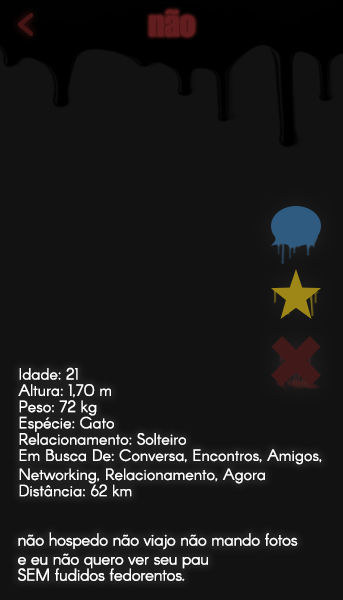
<style>
.page{position:relative;width:343px;height:600px;background:#121212}
.page>*{position:absolute;margin:0}
.t1{font:31px "Impact";letter-spacing:-0.015em;color:#621e1e}
.t2{font:16px "Arcon-Regular";color:#ffffff}
.t3{font:16px/22px "Arcon-Regular";color:#ffffff}
.t4{font:17px/22px "Arcon-Regular";letter-spacing:-0.022em;color:#ffffff}
.t5{font:17px/19px "Arcon-Regular";letter-spacing:-0.022em;color:#ffffff}
</style>
<div class="page">
<p class="t1" style="left:149px;top:9px;width:46px;height:28px">não</p>
<p class="t2" style="left:18px;top:367px;width:304px;height:130px">Idade: 21<br>Altura: 1,70 m<br>Peso: 72 kg<br>Espécie: Gato<br>Relacionamento: Solteiro<br>Em Busca De: Conversa, Encontros, Amigos,<br><span class="t3">Networking, Relacionamento, Agora<br></span>Distância: 62 km</p>
<p class="t4" style="left:18px;top:532px;width:280px;height:49px">não hospedo não viajo não mando fotos<br>e eu não quero ver seu pau<br><span class="t5">SEM fudidos fedorentos.</span></p>
</div>
